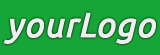
<style>
.page{position:relative;width:160px;height:55px;background:#16a637}
.page>*{position:absolute;margin:0}
.t1{font:34px "Ubuntu-Italic";letter-spacing:0.01em;color:#efefef;font-weight:bold}
</style>
<div class="page">
<p class="t1" style="left:3px;top:12px;width:153px;height:32px">yourLogo</p>
</div>
